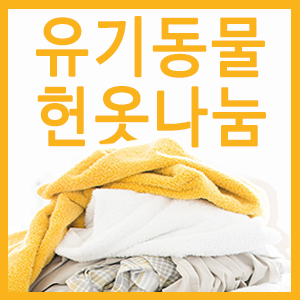
<style>
.page{position:relative;width:300px;height:300px;background:#fdfdfd}
.page>*{position:absolute;margin:0}
.t1{font:64.8px "NanumBarunGothicOTF";letter-spacing:0.075em;color:#fab31b;font-weight:bold;scale:0.91 1}
</style>
<div class="page">
<p class="t1" style="left:36px;top:16px;width:229px;height:62px">유기동물</p>
<p class="t1" style="left:37px;top:86px;width:229px;height:62px">헌옷나눔</p>
</div>
